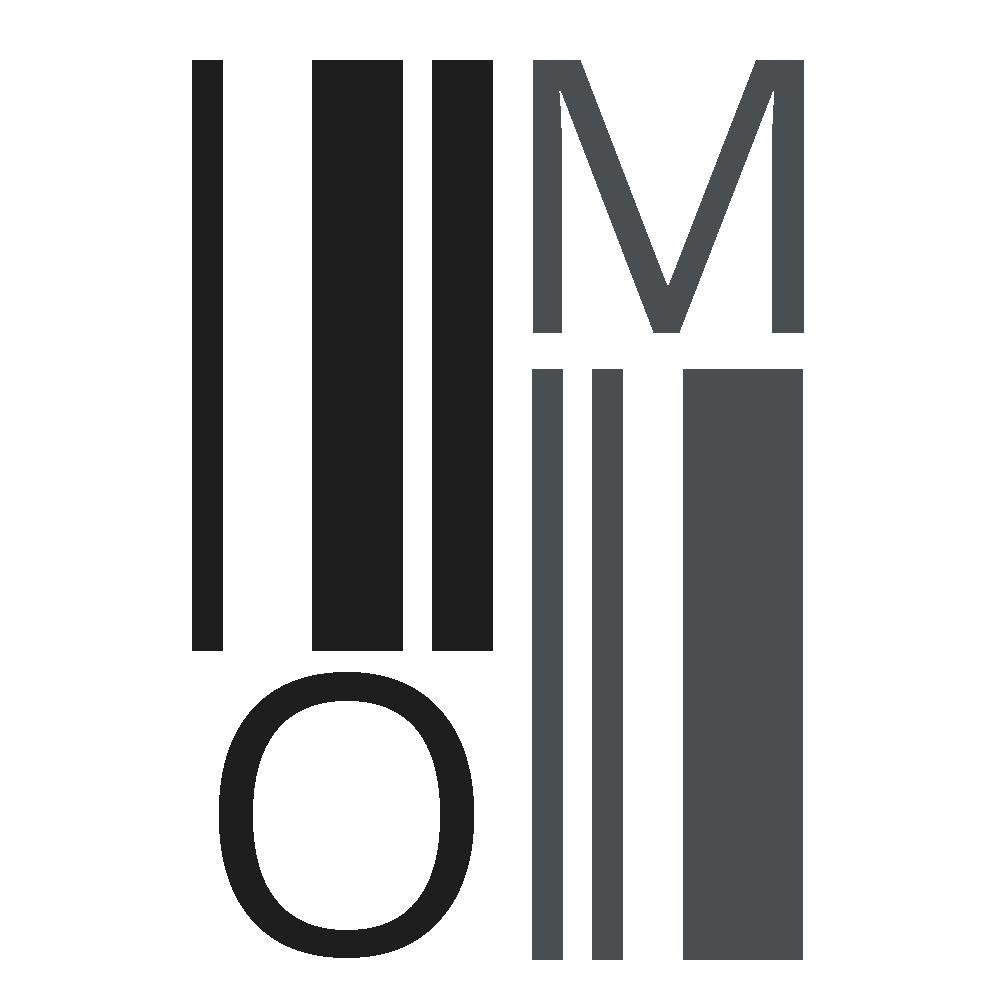
<style>
.page{position:relative;width:1000px;height:1000px;background:#ffffff}
.page>*{position:absolute;margin:0}
.t1{font:383px "OpenSans-Regular";color:#4b4e51}
.t2{font:388.9px "OpenSans-Regular";color:#1f1e1f}
</style>
<div class="page">
<p class="t1" style="left:533px;top:60px;width:271px;height:273px">M</p>
<p class="t2" style="left:219px;top:672px;width:255px;height:286px">O</p>
</div>
